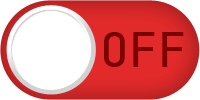
<style>
.page{position:relative;width:200px;height:100px;background:#ffffff}
.page>*{position:absolute;margin:0}
.t1{font:48px "JetBrainsMono-Medium";color:#820000}
</style>
<div class="page">
<p class="t1" style="left:104px;top:32px;width:80px;height:35px">OFF</p>
</div>
